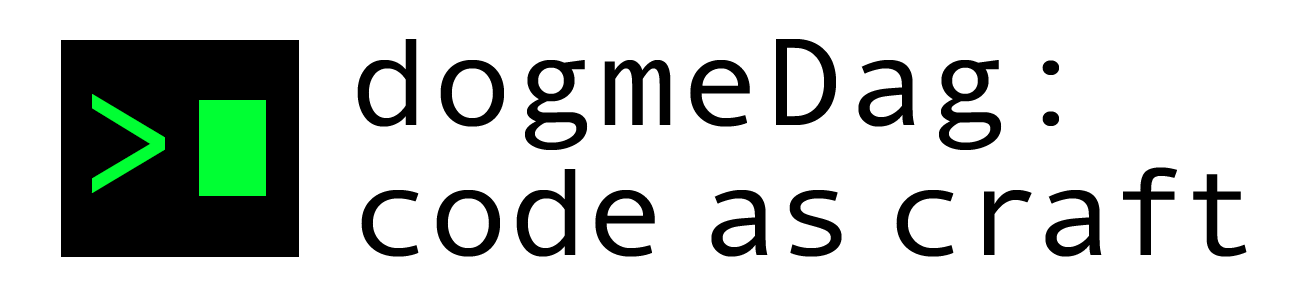
<style>
.page{position:relative;width:1300px;height:295px;background:#ffffff}
.page>*{position:absolute;margin:0}
.t1{font:124.6px "AndaleMono";color:#000000;scale:1.11 1}
.t2{font:200px "AndaleMono";color:#00ff33}
.t3{font:124.6px "AndaleMono";letter-spacing:-0.04em;color:#000000;scale:1.11 1}
</style>
<div class="page">
<p class="t1" style="left:357px;top:39px;width:702px;height:111px">dogmeDag:</p>
<p class="t2" style="left:91px;top:94px;width:74px;height:99px">&gt;</p>
<p class="t3" style="left:361px;top:167px;width:886px;height:90px">code as craft</p>
</div>
